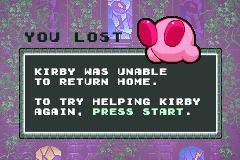
<style>
.page{position:relative;width:240px;height:160px;background:#2d3834}
.page>*{position:absolute;margin:0}
.t1{font:12.5px "GamegirlClassic";color:#0a271c}
.t2{font:8.3px "GamegirlClassic";color:#ffffff}
.t3{font:8.3px "GamegirlClassic";color:#c0ffd6}
</style>
<div class="page">
<p class="t1" style="left:24px;top:32px;width:99px;height:10px">YOU LOST</p>
<p class="t2" style="left:34px;top:68px;width:166px;height:48px">KIRBY WAS UNABLE<br>TO RETURN HOME.<br><br>TO TRY HELPING KIRBY<br>AGAIN, <span class="t3">PRESS START</span>.</p>
</div>
